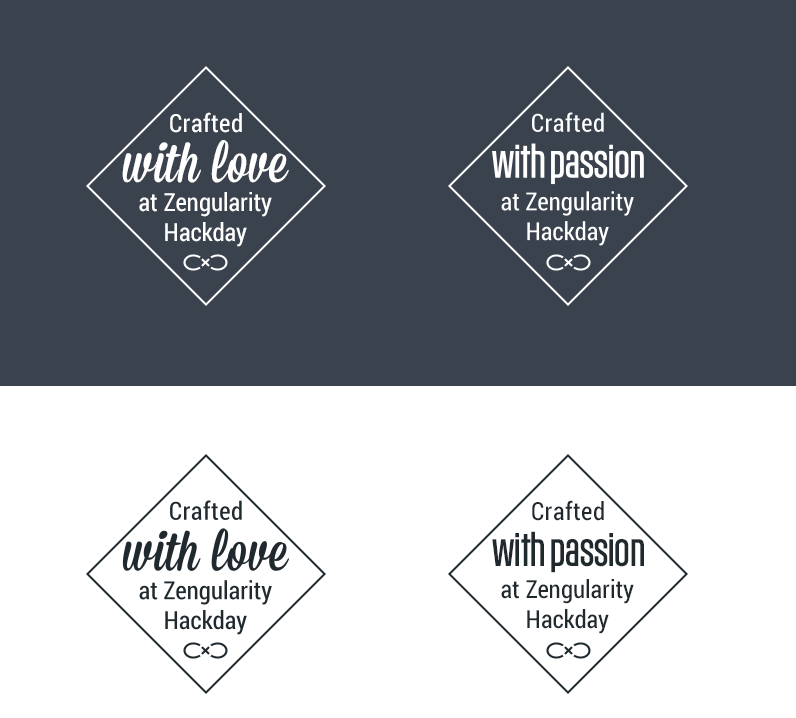
<style>
.page{position:relative;width:796px;height:718px;background:#3a424e}
.page>*{position:absolute;margin:0}
.t1{font:24.9px "RobotoCondensed-Regular";letter-spacing:0.02em;color:#ffffff}
.t2{font:56px "Mission-Script";letter-spacing:0.01em;color:#ffffff}
.t3{font:24.9px/29.8px "RobotoCondensed-Regular";color:#ffffff}
.t4{font:24.9px "RobotoCondensed-Regular";letter-spacing:0.02em;color:#1f292e}
.t5{font:47px "FCKaiserCondWeb-Regular";color:#1f292e}
.t6{font:24.9px/29.8px "RobotoCondensed-Regular";color:#1f292e}
</style>
<div class="page">
<p class="t1" style="left:170px;top:112px;width:72px;height:21px">Crafted</p>
<p class="t2" style="left:122px;top:140px;width:167px;height:43px">with love</p>
<p class="t3" style="left:139px;top:192px;width:133px;height:55px;text-align:center">at Zengularity<br>Hackday</p>
<p class="t4" style="left:532px;top:500px;width:72px;height:21px">Crafted</p>
<p class="t5" style="left:492px;top:531px;width:152px;height:42px">with passion</p>
<p class="t6" style="left:501px;top:579px;width:133px;height:55px;text-align:center">at Zengularity<br>Hackday</p>
</div>
